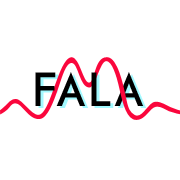
<style>
.page{position:relative;width:180px;height:180px;background:#ffffff}
.page>*{position:absolute;margin:0}
.t1{font:48px "Cassannet-Regular";letter-spacing:0.045em;color:#000000}
.t2{font:48px "Cassannet-Regular";letter-spacing:0.045em}
</style>
<div class="page">
<p class="t1" style="left:35px;top:72px;width:76px;height:34px">FAL</p>
<p class="t2" style="left:38px;top:74px;width:109px;height:34px">FALA</p>
<p class="t1" style="left:114px;top:72px;width:30px;height:34px">A</p>
</div>
